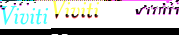
<style>
.page{position:relative;width:179px;height:35px;background:#ffffff}
.page>*{position:absolute;margin:0}
.t1{font:30px "MrsEavesItalic";color:#40ffff}
</style>
<div class="page">
<p class="t1" style="left:0px;top:6px;width:48px;height:19px">Viviti</p>
</div>
